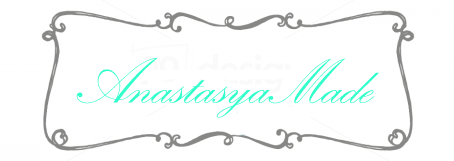
<style>
.page{position:relative;width:454px;height:161px;background:#ffffff}
.page>*{position:absolute;margin:0}
.t1{font:65px "KunstlerScript";color:#33ffcc}
</style>
<div class="page">
<p class="t1" style="left:76px;top:58px;width:303px;height:60px">AnastasyaMade</p>
</div>
